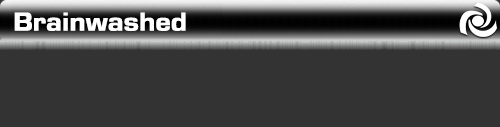
<style>
.page{position:relative;width:500px;height:127px;background:#333333}
.page>*{position:absolute;margin:0}
.t1{font:27px "Eurostile-Hea";letter-spacing:-0.02em;color:#ffffff;font-weight:bold;scale:1.11 1}
</style>
<div class="page">
<p class="t1" style="left:14px;top:12px;width:172px;height:19px">Brainwashed</p>
</div>
